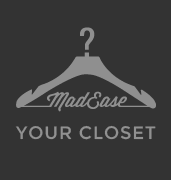
<style>
.page{position:relative;width:171px;height:180px;background:#333333}
.page>*{position:absolute;margin:0}
.t1{font:18px "Montserrat-Regular";letter-spacing:0.05em;color:#919191}
</style>
<div class="page">
<p class="t1" style="left:15px;top:125px;width:141px;height:15px">YOUR CLOSET</p>
</div>
